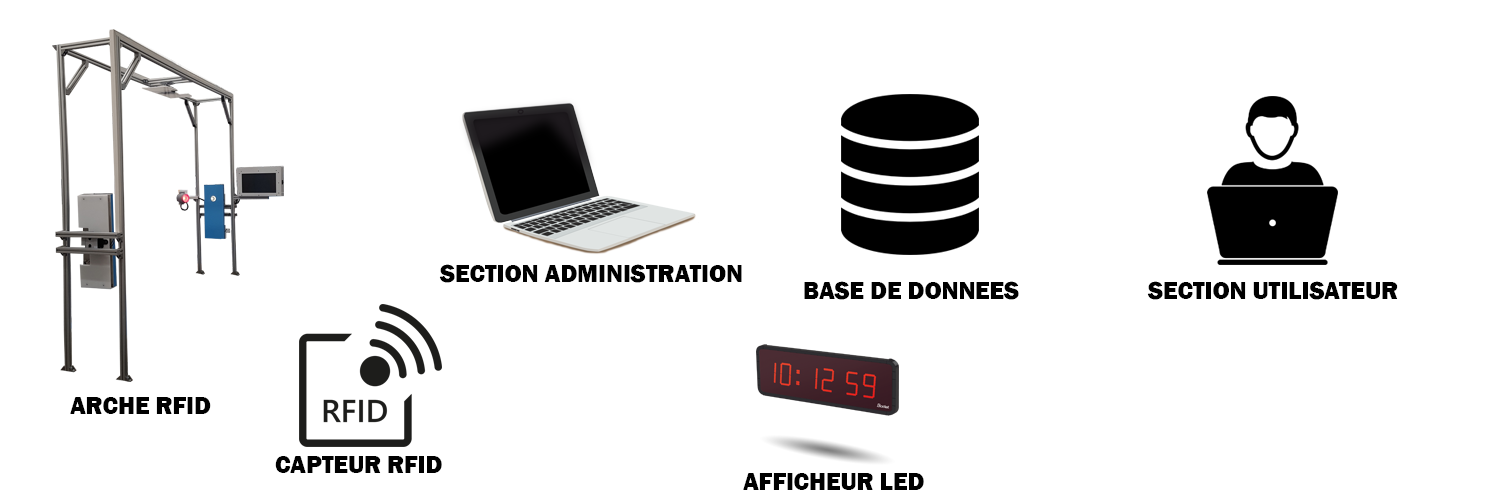
<style>
.page{position:relative;width:1500px;height:500px;background:#ffffff}
.page>*{position:absolute;margin:0}
.t1{font:24.7px "FranklinGothic-Heavy";color:#000000}
</style>
<div class="page">
<p class="t1" style="left:439px;top:264px;width:303px;height:19px">SECTION ADMINISTRATION</p>
<p class="t1" style="left:804px;top:281px;width:215px;height:19px">BASE DE DONNEES</p>
<p class="t1" style="left:1147px;top:281px;width:251px;height:19px">SECTION UTILISATEUR</p>
<p class="t1" style="left:70px;top:397px;width:141px;height:17px">ARCHE RFID</p>
<p class="t1" style="left:275px;top:456px;width:167px;height:17px">CAPTEUR RFID</p>
<p class="t1" style="left:743px;top:473px;width:181px;height:17px">AFFICHEUR LED</p>
</div>
